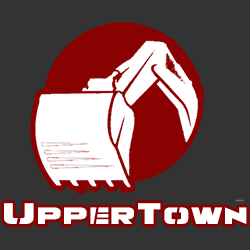
<style>
.page{position:relative;width:250px;height:250px;background:#333333}
.page>*{position:absolute;margin:0}
.t1{font:30.4px "Angolmois";color:#ffffff}
</style>
<div class="page">
<p class="t1" style="left:4px;top:203px;width:243px;height:21px">UpperTown</p>
</div>
